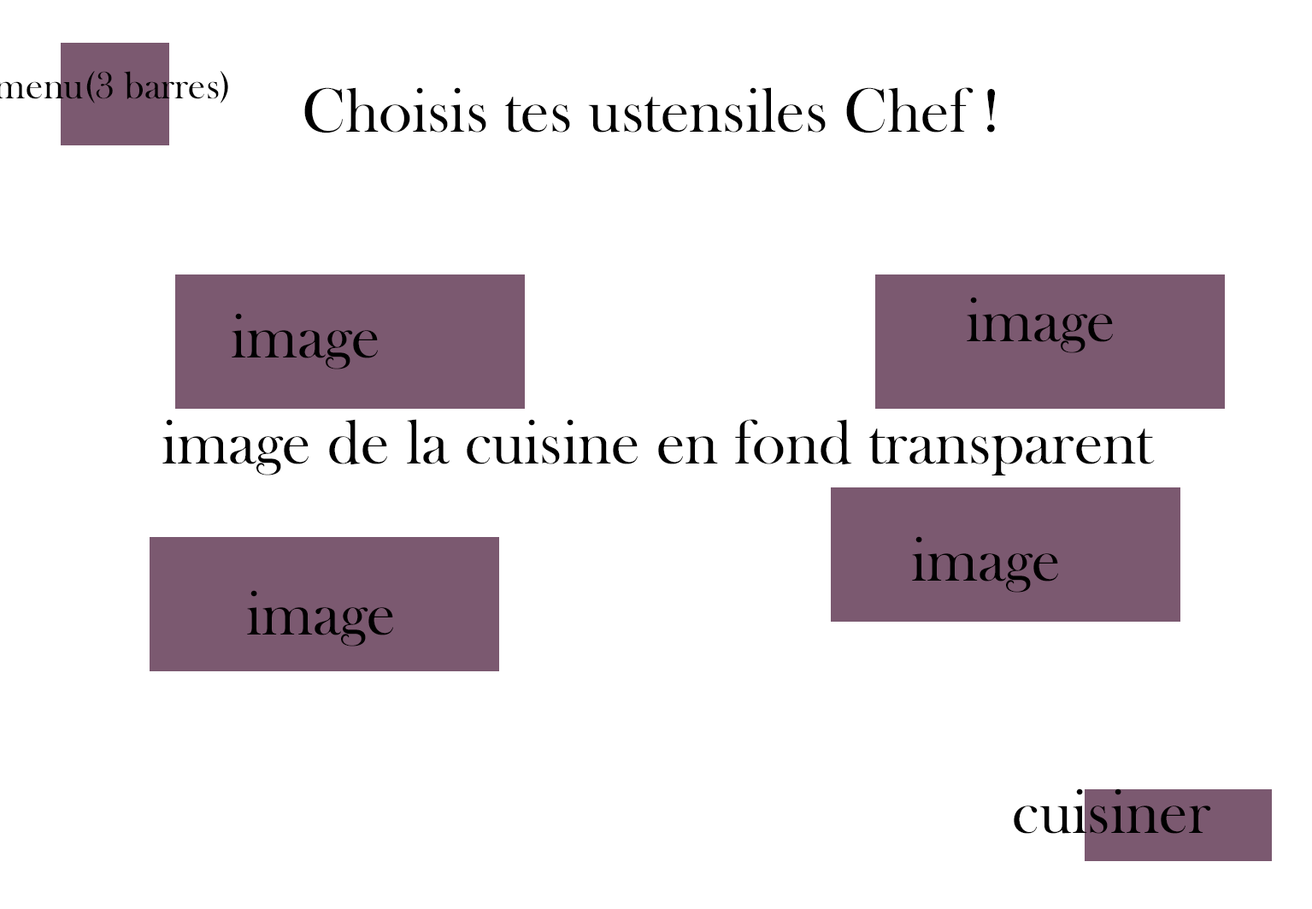
<style>
.page{position:relative;width:1312px;height:909px;background:#ffffff}
.page>*{position:absolute;margin:0}
.t1{font:64.1px "BaskOldFace";color:#000000}
</style>
<div class="page">
<p class="t1" style="left:304px;top:87px;width:691px;height:46px">Choisis tes ustensiles Chef !</p>
<p class="t1" style="left:967px;top:297px;width:146px;height:56px">image</p>
<p class="t1" style="left:232px;top:313px;width:146px;height:56px">image</p>
<p class="t1" style="left:162px;top:419px;width:993px;height:56px">image de la cuisine en fond transparent</p>
<p class="t1" style="left:912px;top:536px;width:146px;height:56px">image</p>
<p class="t1" style="left:247px;top:590px;width:146px;height:56px">image</p>
<p class="t1" style="left:1014px;top:788px;width:197px;height:45px">cuisiner</p>
</div>
